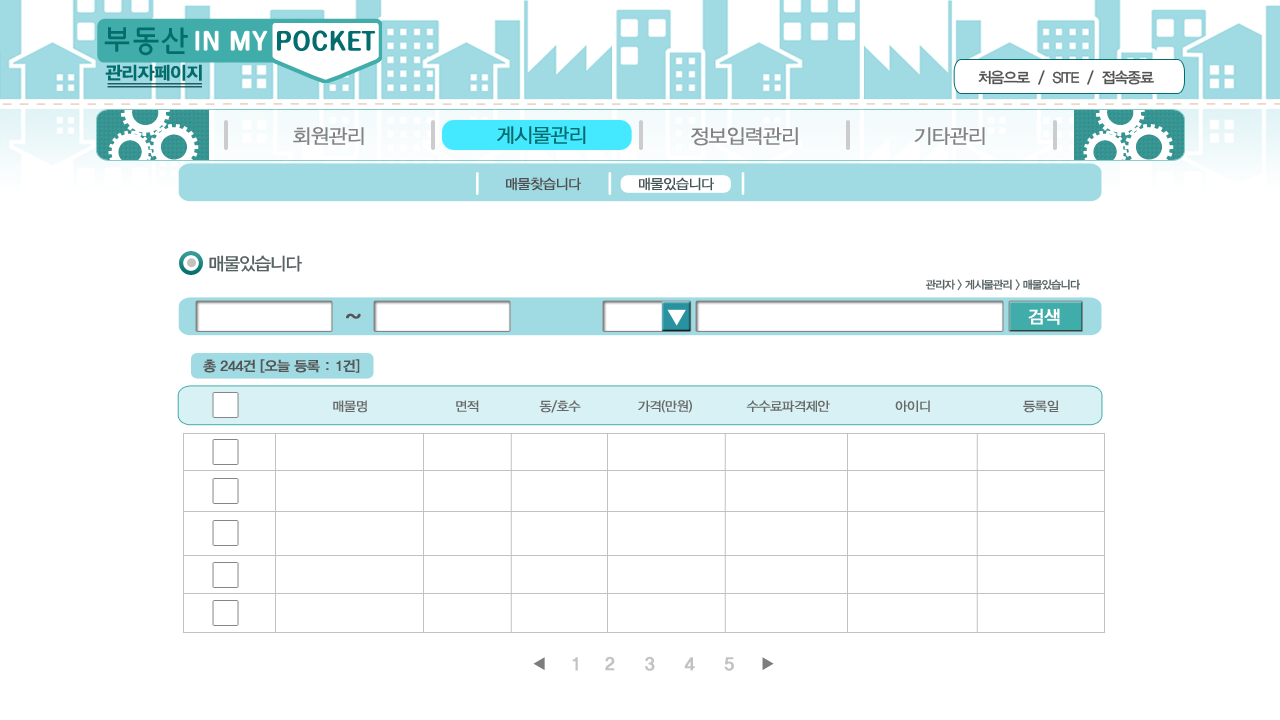
<style>
.page{position:relative;width:1280px;height:720px;background:#ffffff}
.page>*{position:absolute;margin:0}
.t1{font:17.8px "YDIYGO340";letter-spacing:-0.04em;color:#036d6d;font-weight:bold}
.t2{font:15px "YDIYGO330";letter-spacing:-0.06em;color:#535353}
.t3{font:20px "YDIYGO320";letter-spacing:-0.04em;color:#036d6d;font-weight:bold}
.t4{font:20px "YDIYGO320";letter-spacing:-0.04em;color:#838383;font-weight:bold}
.t5{font:14px "YDIYGO320";letter-spacing:-0.04em;color:#4f4f4f;font-weight:bold}
.t6{font:14px "YDIYGO320";letter-spacing:-0.04em;color:#445658;font-weight:bold}
.t7{font:18px "YDIYGO330";letter-spacing:-0.06em;color:#576262}
.t8{font:11px "YDIYGO330";letter-spacing:-0.06em;color:#576262}
.t9{font:23.8px "FBsky-Medium--KSCpc-EUC-H";letter-spacing:-0.04em;color:#555555;font-weight:bold}
.t10{font:17.8px "YDIYGO330";letter-spacing:-0.04em;color:#ffffff;font-weight:bold}
.t11{font:13.8px "YDIYGO330";letter-spacing:-0.04em;color:#555555;font-weight:bold}
.t12{font:13px "YDIYGO320";letter-spacing:-0.04em;color:#696969;font-weight:bold}
.t13{font:17.8px "YDIYGO340";letter-spacing:-0.04em;color:#c2c2c2;font-weight:bold}
</style>
<div class="page">
<p class="t1" style="left:105px;top:64px;width:97px;height:17px">관리자페이지</p>
<p class="t2" style="left:978px;top:70px;width:176px;height:15px">처음으로  /  SITE  /  접속종료</p>
<p class="t3" style="left:497px;top:126px;width:89px;height:18px">게시물관리</p>
<p class="t4" style="left:293px;top:127px;width:71px;height:18px">회원관리</p>
<p class="t4" style="left:691px;top:127px;width:107px;height:19px">정보입력관리</p>
<p class="t4" style="left:914px;top:127px;width:71px;height:18px">기타관리</p>
<p class="t5" style="left:506px;top:177px;width:75px;height:14px">매물찾습니다</p>
<p class="t6" style="left:639px;top:177px;width:75px;height:14px">매물있습니다</p>
<p class="t7" style="left:209px;top:255px;width:93px;height:17px">매물있습니다</p>
<p class="t8" style="left:925px;top:279px;width:156px;height:12px">관리자 &gt; 게시물관리 &gt; 매물있습니다</p>
<p class="t9" style="left:346px;top:313px;width:15px;height:6px">~</p>
<p class="t10" style="left:1028px;top:308px;width:32px;height:17px">검색</p>
<p class="t11" style="left:203px;top:359px;width:157px;height:14px">총 244건 [오늘 등록 : 1건]</p>
<p class="t12" style="left:333px;top:400px;width:34px;height:13px">매물명</p>
<p class="t12" style="left:456px;top:400px;width:23px;height:12px">면적</p>
<p class="t12" style="left:539px;top:400px;width:42px;height:13px">동/호수</p>
<p class="t12" style="left:638px;top:400px;width:54px;height:13px">가격(만원)</p>
<p class="t12" style="left:746px;top:400px;width:84px;height:12px">수수료파격제안</p>
<p class="t12" style="left:895px;top:400px;width:35px;height:12px">아이디</p>
<p class="t12" style="left:1023px;top:400px;width:36px;height:13px">등록일</p>
<p class="t13" style="left:572px;top:656px;width:162px;height:15px">1    2     3     4     5</p>
</div>
